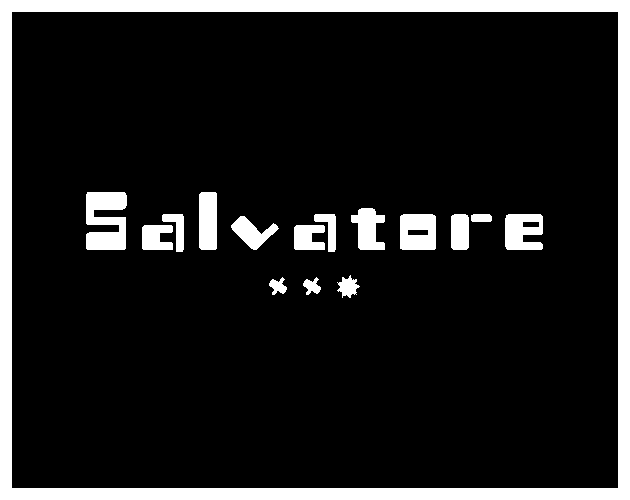
<style>
.page{position:relative;width:630px;height:500px;background:#000000}
.page>*{position:absolute;margin:0}
.t1{font:76px "AB-roman";letter-spacing:0.1em;color:#ffffff}
</style>
<div class="page">
<p class="t1" style="left:86px;top:192px;width:457px;height:60px">Salvatore</p>
</div>
